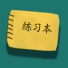
<style>
.page{position:relative;width:68px;height:68px}
.page>*{position:absolute;margin:0}
.t1{font:11px "¿¬Ìå";letter-spacing:-0.075em}
</style>
<div class="page">
<p class="t1" style="left:22px;top:21px;width:30px;height:13px;rotate:6deg">练习本</p>
</div>
